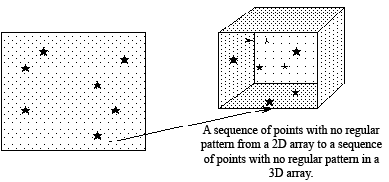
<style>
.page{position:relative;width:389px;height:182px;background:#ffffff}
.page>*{position:absolute;margin:0}
.t1{font:12px "TimesNewRomanPSMT";color:#000000}
</style>
<div class="page">
<p class="t1" style="left:200px;top:125px;width:182px;height:55px;text-align:center">A sequence of points with no regular<br>pattern from a 2D array to a sequence<br>of points with no regular pattern in a<br>3D array.</p>
</div>
